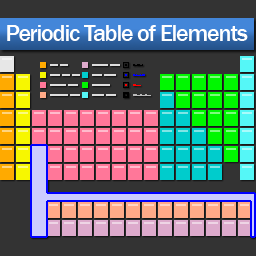
<style>
.page{position:relative;width:256px;height:256px;background:#333333}
.page>*{position:absolute;margin:0}
.t1{font:24px "FranklinGothic-Medium";letter-spacing:-0.05em;color:#ffffff}
</style>
<div class="page">
<p class="t1" style="left:7px;top:25px;width:241px;height:16px">Periodic Table of Elements</p>
</div>
